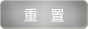
<style>
.page{position:relative;width:88px;height:29px}
.page>*{position:absolute;margin:0}
.t1{font:13.9px "MicrosoftYaHei";letter-spacing:0.975em;color:#ffffff}
</style>
<div class="page">
<p class="t1" style="left:24px;top:8px;width:41px;height:14px">重置</p>
</div>
